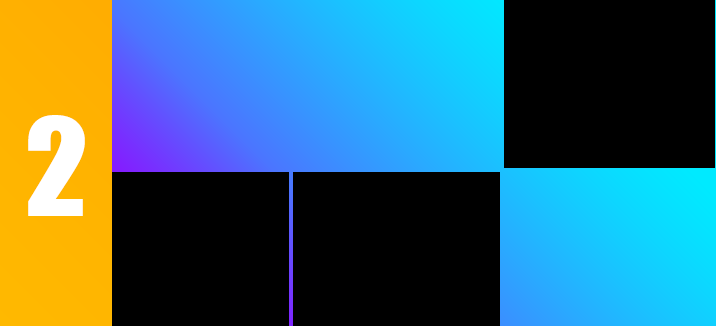
<style>
.page{position:relative;width:716px;height:326px;background:#000000}
.page>*{position:absolute;margin:0}
.t1{font:125px "Impact";color:#ffffff}
</style>
<div class="page">
<p class="t1" style="left:28px;top:115px;width:57px;height:101px">2</p>
</div>
